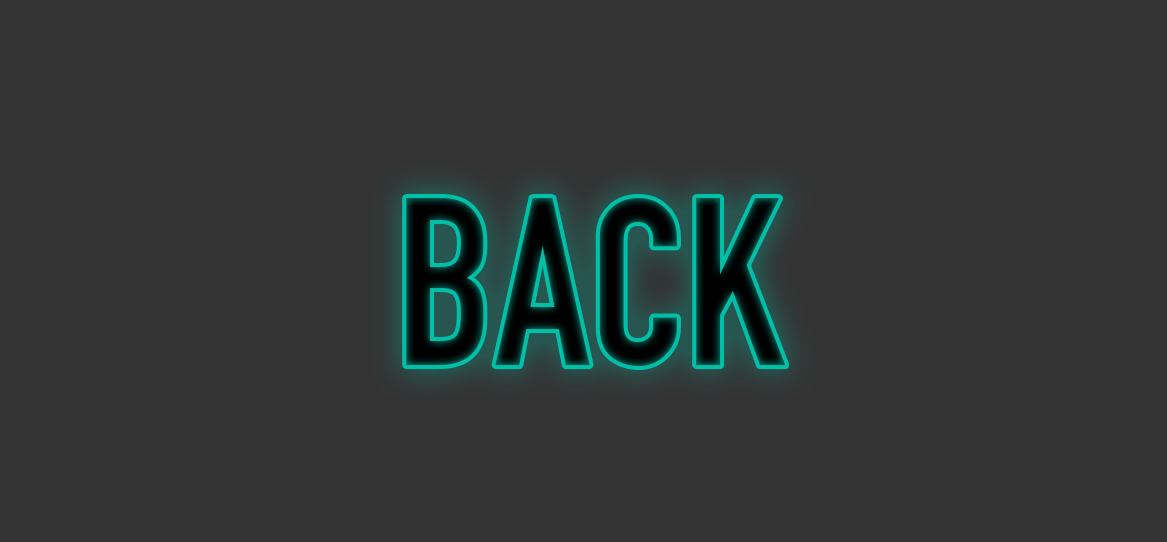
<style>
.page{position:relative;width:1167px;height:542px;background:#333333}
.page>*{position:absolute;margin:0}
.t1{font:233.7px "DINEngschrift"}
</style>
<div class="page">
<p class="t1" style="left:406px;top:198px;width:380px;height:168px">BACK</p>
</div>
